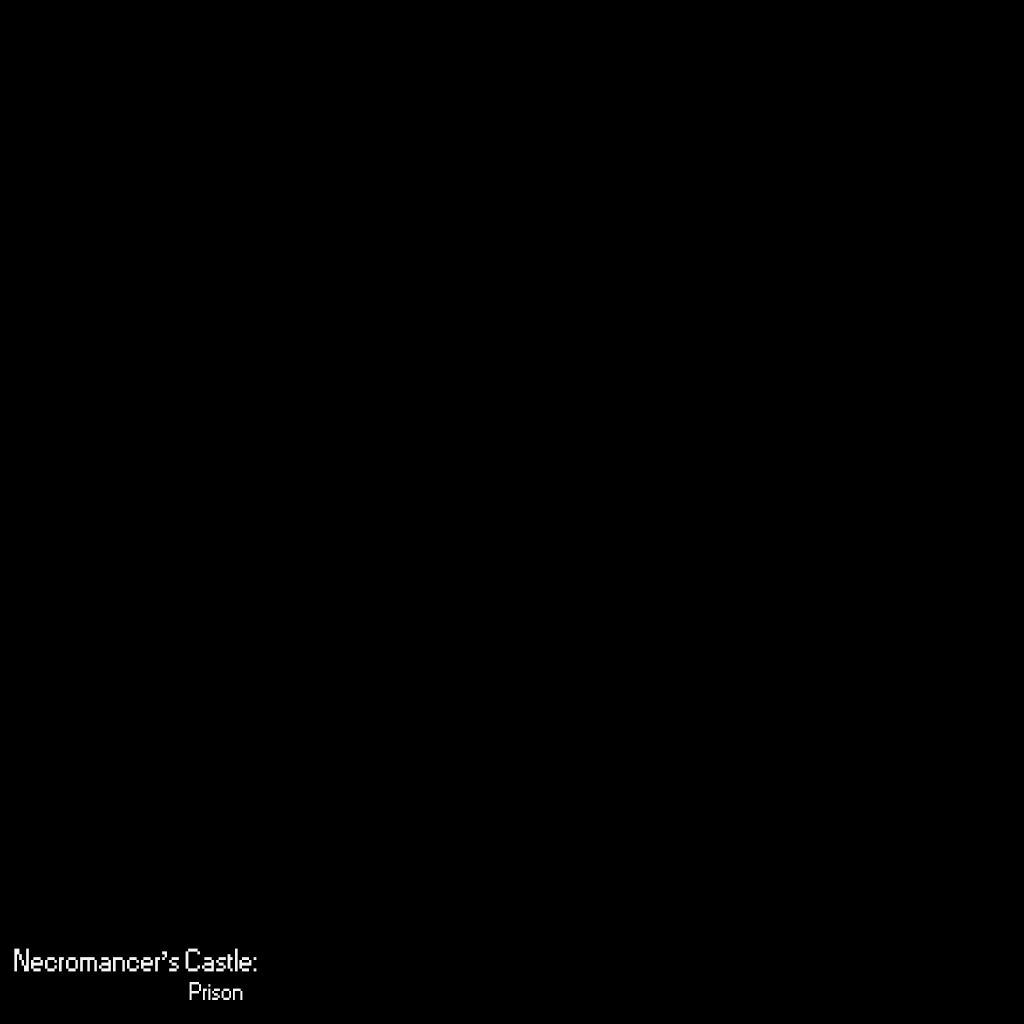
<style>
.page{position:relative;width:1024px;height:1024px;background:#000000}
.page>*{position:absolute;margin:0}
.t1{font:30px "Small Fonts";color:#f6f6f6}
.t2{font:24px "Small Fonts";color:#f6f6f6}
</style>
<div class="page">
<p class="t1" style="left:14px;top:948px;width:243px;height:52px;text-align:center">Necromancer’s Castle:<br><span class="t2">              Prison</span></p>
</div>
